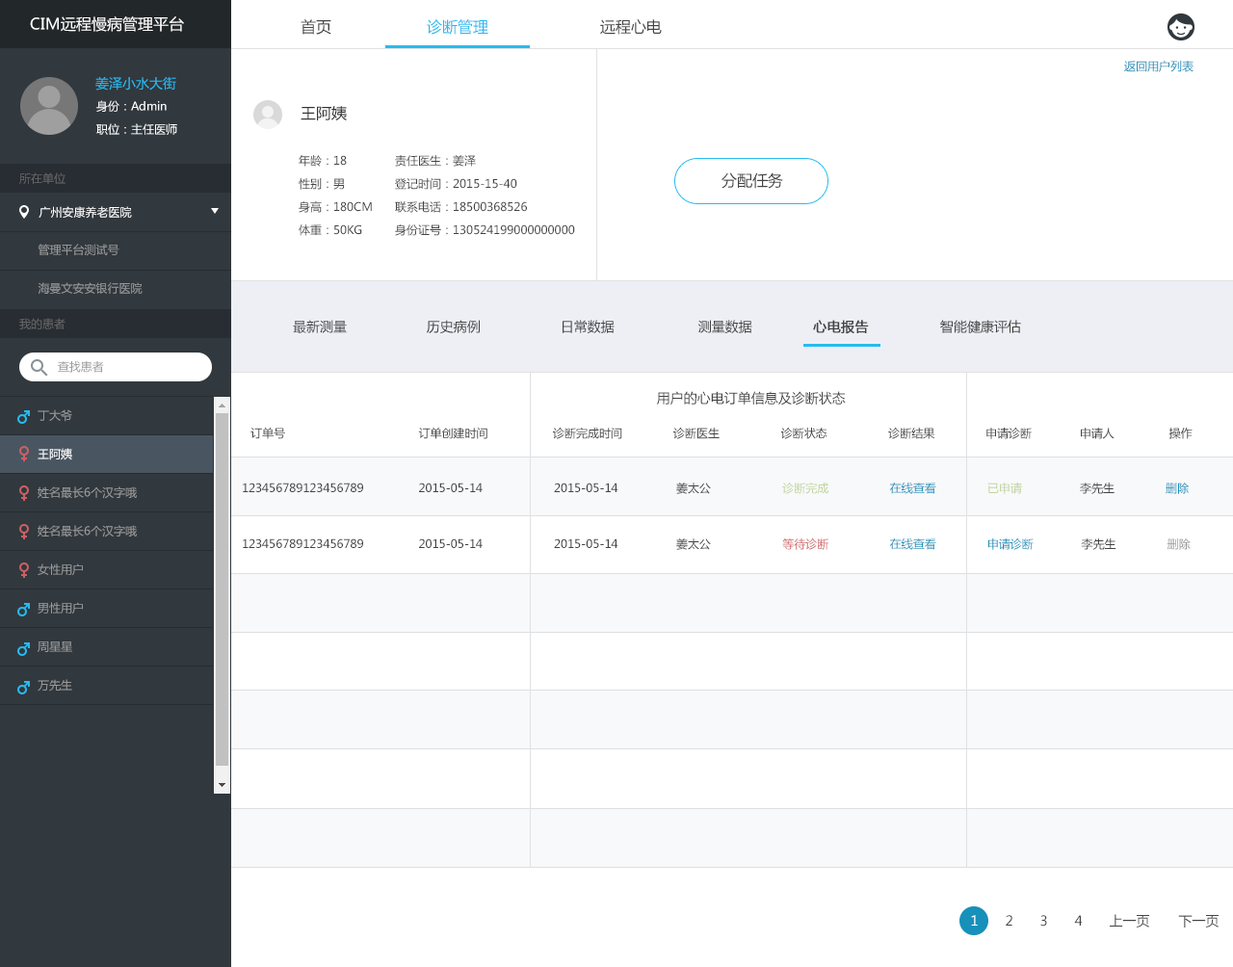
<style>
.page{position:relative;width:1233px;height:967px;background:#ffffff}
.page>*{position:absolute;margin:0}
.t1{font:15.4px "MicrosoftYaHei";color:#ffffff}
.t2{font:15.4px "MicrosoftYaHei";color:#434343}
.t3{font:15.4px "MicrosoftYaHei";color:#26bbef}
.t4{font:11.6px "MicrosoftYaHei";color:#1790ba}
.t5{font:13.5px "MicrosoftYaHei";color:#26bbef}
.t6{font:11.6px "MicrosoftYaHei";color:#ffffff}
.t7{font:15.4px "MicrosoftYaHei";color:#333333}
.t8{font:11.6px/23.1px "MicrosoftYaHei";color:#434343}
.t9{font:11.6px "MicrosoftYaHei";color:#666666}
.t10{font:11.6px "MicrosoftYaHei";color:#999999}
.t11{font:13.5px "MicrosoftYaHei";color:#434343}
.t12{font:13.5px "MicrosoftYaHei";color:#434343;font-weight:bold}
.t13{font:11.6px/19.3px "MicrosoftYaHei";color:#999999}
.t14{font:11.6px/19.3px "MicrosoftYaHei";color:#ffffff}
.t15{font:11.6px "MicrosoftYaHei";color:#434343}
.t16{font:11.6px "MicrosoftYaHei";color:#c1d4a0}
.t17{font:11.6px "MicrosoftYaHei";color:#cc6063}
.t18{font:13.5px "MicrosoftYaHei";color:#ffffff}
</style>
<div class="page">
<p class="t1" style="left:30px;top:16px;width:154px;height:16px">CIM远程慢病管理平台</p>
<p class="t2" style="left:301px;top:19px;width:30px;height:16px">首页</p>
<p class="t3" style="left:427px;top:19px;width:235px;height:16px">诊断管理    <span class="t2">远程心电</span></p>
<p class="t4" style="left:1124px;top:61px;width:69px;height:11px">返回用户列表</p>
<p class="t5" style="left:95px;top:76px;width:81px;height:15px">姜泽小水大街</p>
<p class="t6" style="left:96px;top:100px;width:71px;height:12px">身份：Admin</p>
<p class="t7" style="left:301px;top:106px;width:46px;height:14px">王阿姨</p>
<p class="t6" style="left:96px;top:123px;width:81px;height:12px">职位：主任医师</p>
<p class="t8" style="left:299px;top:155px;width:73px;height:81px">年龄：18 <br>性别：男<br>身高：180CM<br>体重：50KG</p>
<p class="t8" style="left:395px;top:155px;width:180px;height:81px">责任医生：姜泽<br>登记时间：2015-15-40<br>联系电话：18500368526<br>身份证号：130524199000000000</p>
<p class="t9" style="left:19px;top:172px;width:47px;height:12px">所在单位</p>
<p class="t2" style="left:721px;top:172px;width:62px;height:17px">分配任务</p>
<p class="t6" style="left:39px;top:206px;width:93px;height:13px">广州安康养老医院</p>
<p class="t10" style="left:38px;top:244px;width:81px;height:12px">管理平台测试号</p>
<p class="t10" style="left:38px;top:282px;width:105px;height:12px">海曼文安安银行医院</p>
<p class="t9" style="left:19px;top:318px;width:47px;height:11px">我的患者</p>
<p class="t11" style="left:293px;top:320px;width:728px;height:14px">最新测量                    历史病例                    日常数据                     测量数据  <span class="t12">心电报告</span>                  智能健康评估</p>
<p class="t10" style="left:58px;top:361px;width:46px;height:12px">查找患者</p>
<p class="t11" style="left:657px;top:391px;width:189px;height:15px">用户的心电订单信息及诊断状态</p>
<p class="t13" style="left:38px;top:409px;width:99px;height:283px">丁大爷<br><br><span class="t14">王阿姨<br></span><br>姓名最长6个汉字哦<br><br>姓名最长6个汉字哦<br><br>女性用户<br><br>男性用户<br><br>周星星<br><br>万先生<br><br>男女图表请区分<br><br>男性用户<br><br>男性用户<br><br>女性用户<br><br>工程师</p>
<p class="t15" style="left:250px;top:427px;width:943px;height:12px">订单号                                       订单创建时间                   诊断完成时间      诊断医生      诊断状态          诊断结果         申请诊断              申请人                操作</p>
<p class="t15" style="left:243px;top:482px;width:947px;height:12px">123456789123456789                2015-05-14            2015-05-14                 姜太公            <span class="t16"> 诊断完成                </span><span class="t4">在线查看              </span><span class="t16">已申请</span>                 李先生              <span class="t4"> 删除</span></p>
<p class="t15" style="left:243px;top:538px;width:948px;height:12px">123456789123456789                2015-05-14            2015-05-14                 姜太公             <span class="t17">等待诊断                </span><span class="t4">在线查看              申请诊断</span>              李先生               <span class="t10">删除</span></p>
<p class="t11" style="left:971px;top:914px;width:248px;height:14px"><span class="t18">1</span> 2 3 4 上一页 下一页</p>
</div>
